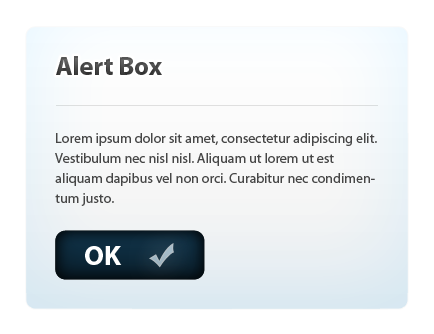
<style>
.page{position:relative;width:434px;height:334px;background:#ffffff}
.page>*{position:absolute;margin:0}
.t1{font:26px "MyriadPro-Bold";color:#464646}
.t2{font:14px/20px "MyriadPro-Regular";color:#464646}
.t3{font:28px "MyriadPro-Bold";color:#ffffff}
</style>
<div class="page">
<p class="t1" style="left:56px;top:56px;width:106px;height:19px">Alert Box</p>
<p class="t2" style="left:55px;top:133px;width:322px;height:73px">Lorem ipsum dolor sit amet, consectetur adipiscing elit. Vestibulum nec nisl nisl. Aliquam ut lorem ut est aliquam dapibus vel non orci. Curabitur nec condimentum justo.</p>
<p class="t3" style="left:85px;top:246px;width:37px;height:19px">OK</p>
<p class="t3" style="left:85px;top:246px;width:37px;height:19px">OK</p>
</div>
